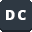
<style>
.page{position:relative;width:32px;height:32px;background:#2e3842}
.page>*{position:absolute;margin:0}
.t1{font:14.5px "OpenSans-Extrabold";letter-spacing:0.11em;color:#ffffff}
</style>
<div class="page">
<p class="t1" style="left:6px;top:10px;width:20px;height:10px">DC</p>
</div>
